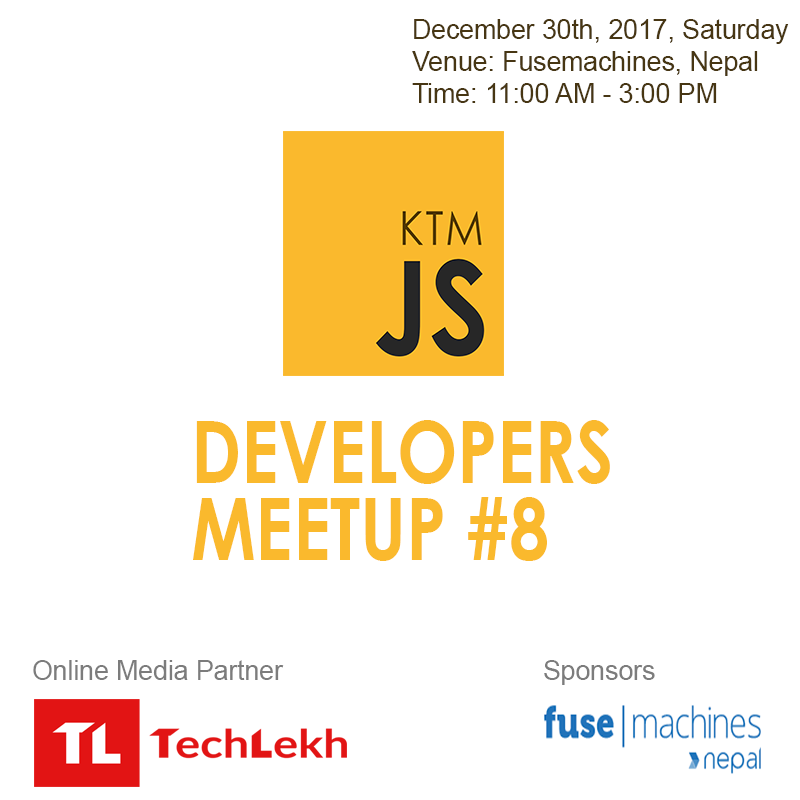
<style>
.page{position:relative;width:800px;height:800px;background:#ffffff}
.page>*{position:absolute;margin:0}
.t1{font:26.5px "ArialMT";color:#473613}
.t2{font:86.1px/76.6px "CenturyGothic-Bold";color:#fab92d;scale:0.83 1}
.t3{font:26.5px "ArialMT";color:#7c7c7c}
</style>
<div class="page">
<p class="t1" style="left:412px;top:19px;width:377px;height:84px">December 30th, 2017, Saturday<br>Venue: Fusemachines, Nepal<br>Time: 11:00 AM - 3:00 PM</p>
<p class="t2" style="left:193px;top:420px;width:417px;height:141px">DEVELOPERS<br>MEETUP #8</p>
<p class="t3" style="left:33px;top:660px;width:251px;height:20px">Online Media Partner</p>
<p class="t3" style="left:544px;top:660px;width:111px;height:25px">Sponsors</p>
</div>
